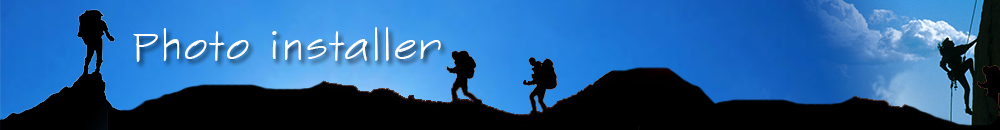
<style>
.page{position:relative;width:1000px;height:130px;background:#000000}
.page>*{position:absolute;margin:0}
.t1{font:40px "SketchFlowPrint";letter-spacing:0.03em;color:#ffffff}
</style>
<div class="page">
<p class="t1" style="left:133px;top:27px;width:308px;height:35px">Photo installer</p>
</div>
